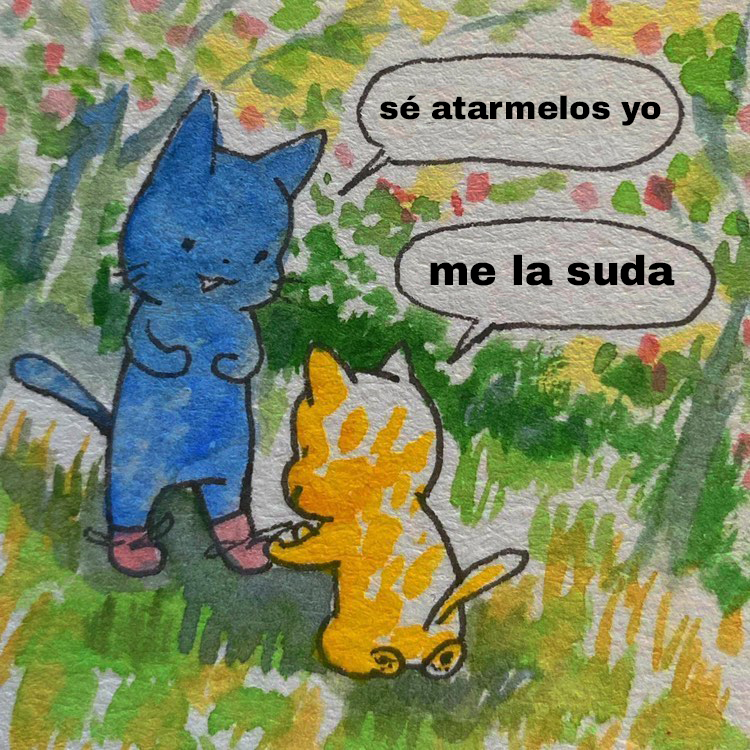
<style>
.page{position:relative;width:750px;height:750px}
.page>*{position:absolute;margin:0}
.t1{font:32.4px "ArchivoBlack-Regular";color:#000000}
.t2{font:41.5px "ArchivoBlack-Regular";color:#000000}
</style>
<div class="page">
<p class="t1" style="left:380px;top:95px;width:281px;height:31px">sé atarmelos yo</p>
<p class="t2" style="left:430px;top:254px;width:245px;height:32px">me la suda</p>
</div>
